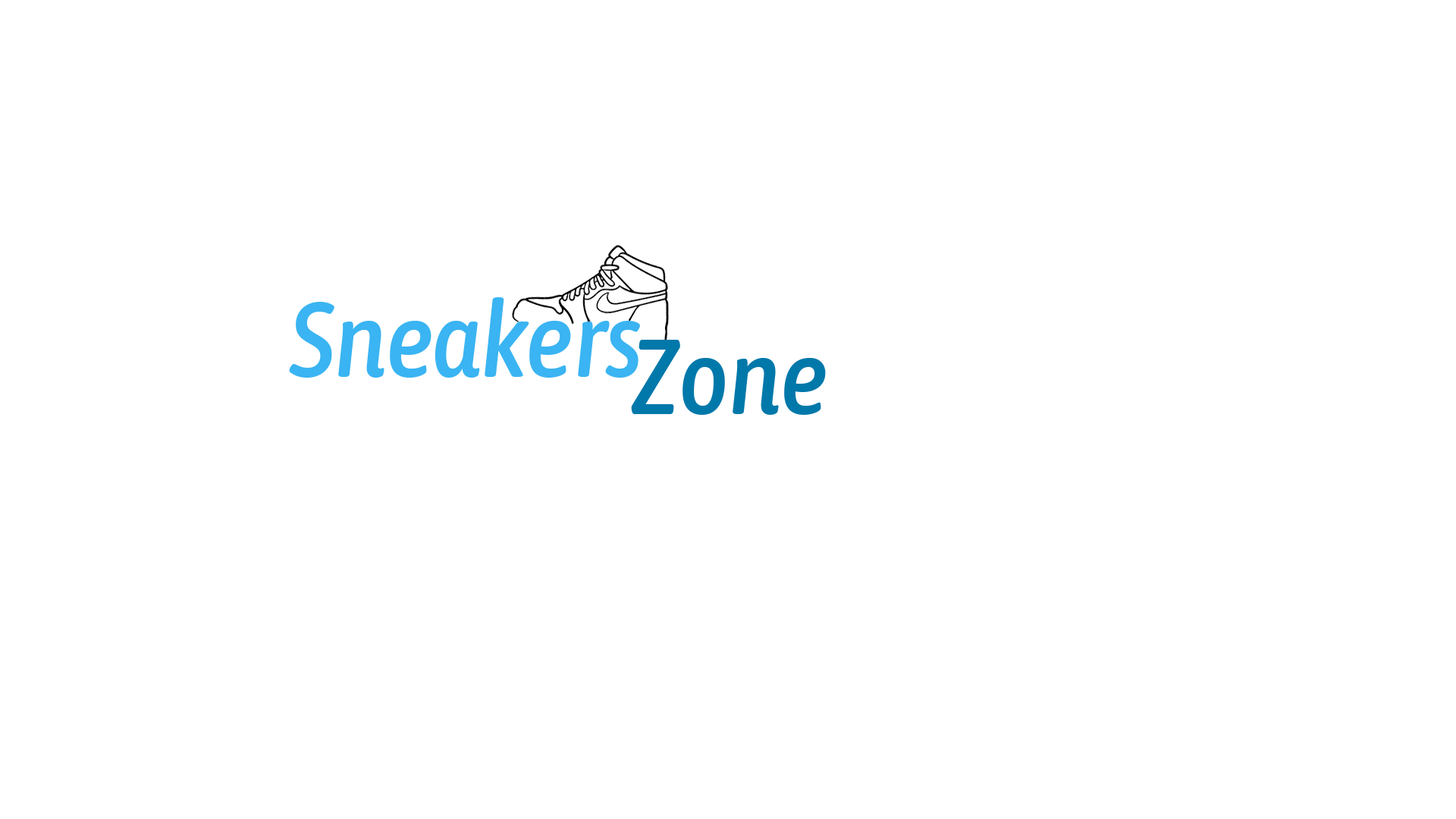
<style>
.page{position:relative;width:1456px;height:819px;background:#ffffff}
.page>*{position:absolute;margin:0}
.t1{font:106px "AsapCondensed-MediumItalic";color:#3ab4f2}
.t2{font:106px "AsapCondensed-MediumItalic";color:#0078aa}
</style>
<div class="page">
<p class="t1" style="left:289px;top:297px;width:351px;height:81px">Sneakers</p>
<p class="t2" style="left:631px;top:340px;width:195px;height:75px">Zone</p>
</div>
